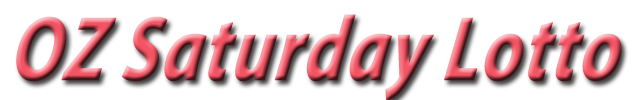
<style>
.page{position:relative;width:634px;height:100px;background:#ffffff}
.page>*{position:absolute;margin:0}
.t1{font:92px "MyriadPro-BoldIt";font-weight:bold;font-style:italic;scale:0.79 1}
</style>
<div class="page">
<p class="t1" style="left:16px;top:14px;width:606px;height:87px">OZ Saturday Lotto</p>
</div>
